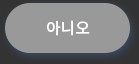
<style>
.page{position:relative;width:139px;height:64px;background:#999999}
.page>*{position:absolute;margin:0}
.t1{font:16px "NotoSansKR-Medium";letter-spacing:0.01em;color:#ffffff}
</style>
<div class="page">
<p class="t1" style="left:47px;top:20px;width:43px;height:16px">아니오</p>
</div>
